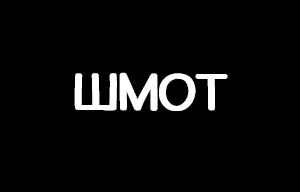
<style>
.page{position:relative;width:300px;height:192px;background:#000000}
.page>*{position:absolute;margin:0}
.t1{font:50px "HQYSaversText";letter-spacing:0.02em;color:#ffffff}
</style>
<div class="page">
<p class="t1" style="left:74px;top:72px;width:152px;height:39px">ШМОТ</p>
<p class="t1" style="left:76px;top:72px;width:152px;height:39px">ШМОТ</p>
</div>
